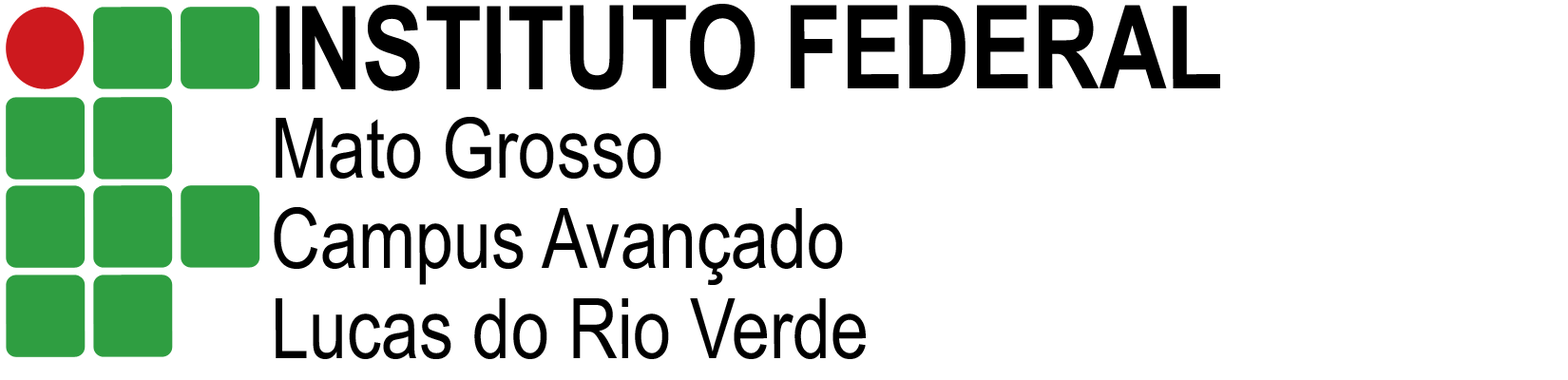
<style>
.page{position:relative;width:1568px;height:380px;background:#ffffff}
.page>*{position:absolute;margin:0}
.t1{font:115.9px "ArialNarrow-Bold";color:#000000}
.t2{font:83.6px "ArialNarrow";color:#000000}
</style>
<div class="page">
<p class="t1" style="left:276px;top:4px;width:944px;height:87px">INSTITUTO FEDERAL</p>
<p class="t2" style="left:276px;top:117px;width:385px;height:62px">Mato Grosso</p>
<p class="t2" style="left:274px;top:207px;width:569px;height:78px">Campus Avançado</p>
<p class="t2" style="left:276px;top:298px;width:590px;height:61px">Lucas do Rio Verde</p>
</div>
